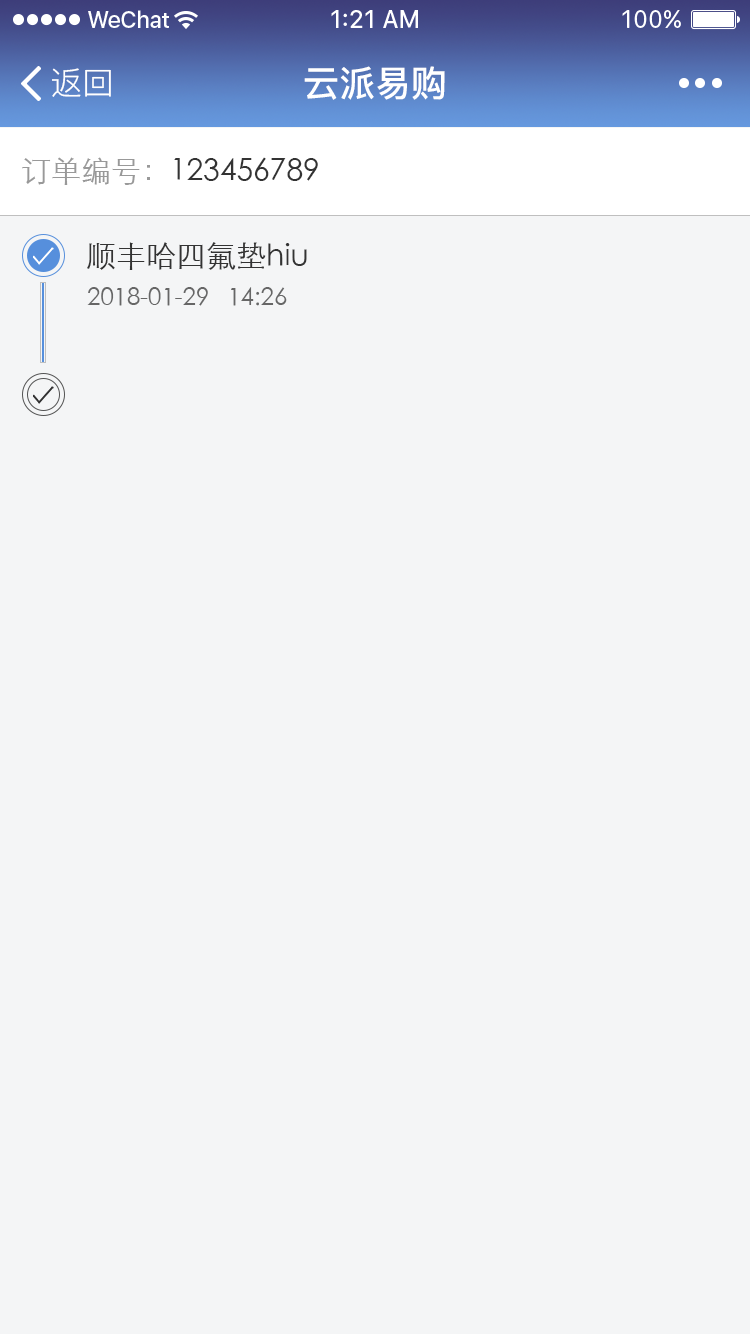
<style>
.page{position:relative;width:750px;height:1334px;background:#f4f5f6}
.page>*{position:absolute;margin:0}
.t1{font:32px "PingFang-SC-Regular";color:#ffffff}
.t2{font:36px "PingFang-SC-Bold";color:#ffffff}
.t3{font:30px "STXihei";color:#999999}
.t4{font:30px "STXihei";color:#333333}
.t5{font:24px "STXihei";color:#666666}
</style>
<div class="page">
<p class="t1" style="left:52px;top:68px;width:59px;height:29px">返回</p>
<p class="t2" style="left:304px;top:66px;width:141px;height:34px">云派易购</p>
<p class="t3" style="left:22px;top:157px;width:128px;height:28px">订单编号：</p>
<p class="t4" style="left:174px;top:157px;width:144px;height:24px">123456789</p>
<p class="t4" style="left:87px;top:242px;width:220px;height:28px">顺丰哈四氟垫hiu</p>
<p class="t5" style="left:87px;top:287px;width:200px;height:19px">2018-01-29   14:26</p>
</div>
